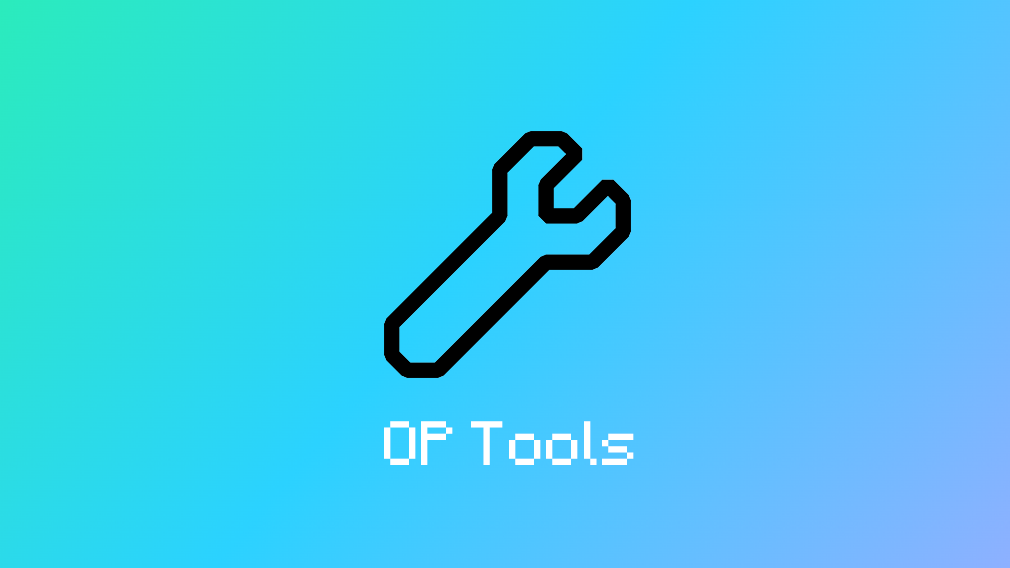
<style>
.page{position:relative;width:1010px;height:568px}
.page>*{position:absolute;margin:0}
.t1{font:50px "MinecraftAE-Pixel";color:#ffffff}
</style>
<div class="page">
<p class="t1" style="left:384px;top:421px;width:250px;height:44px">OP Tools</p>
</div>
